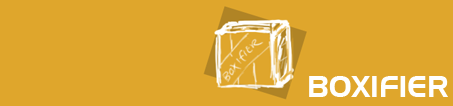
<style>
.page{position:relative;width:453px;height:106px;background:#dfa62c}
.page>*{position:absolute;margin:0}
.t1{font:30px "Slicker";color:#ffffff}
</style>
<div class="page">
<p class="t1" style="left:309px;top:76px;width:139px;height:21px">BOXIFIER</p>
</div>
